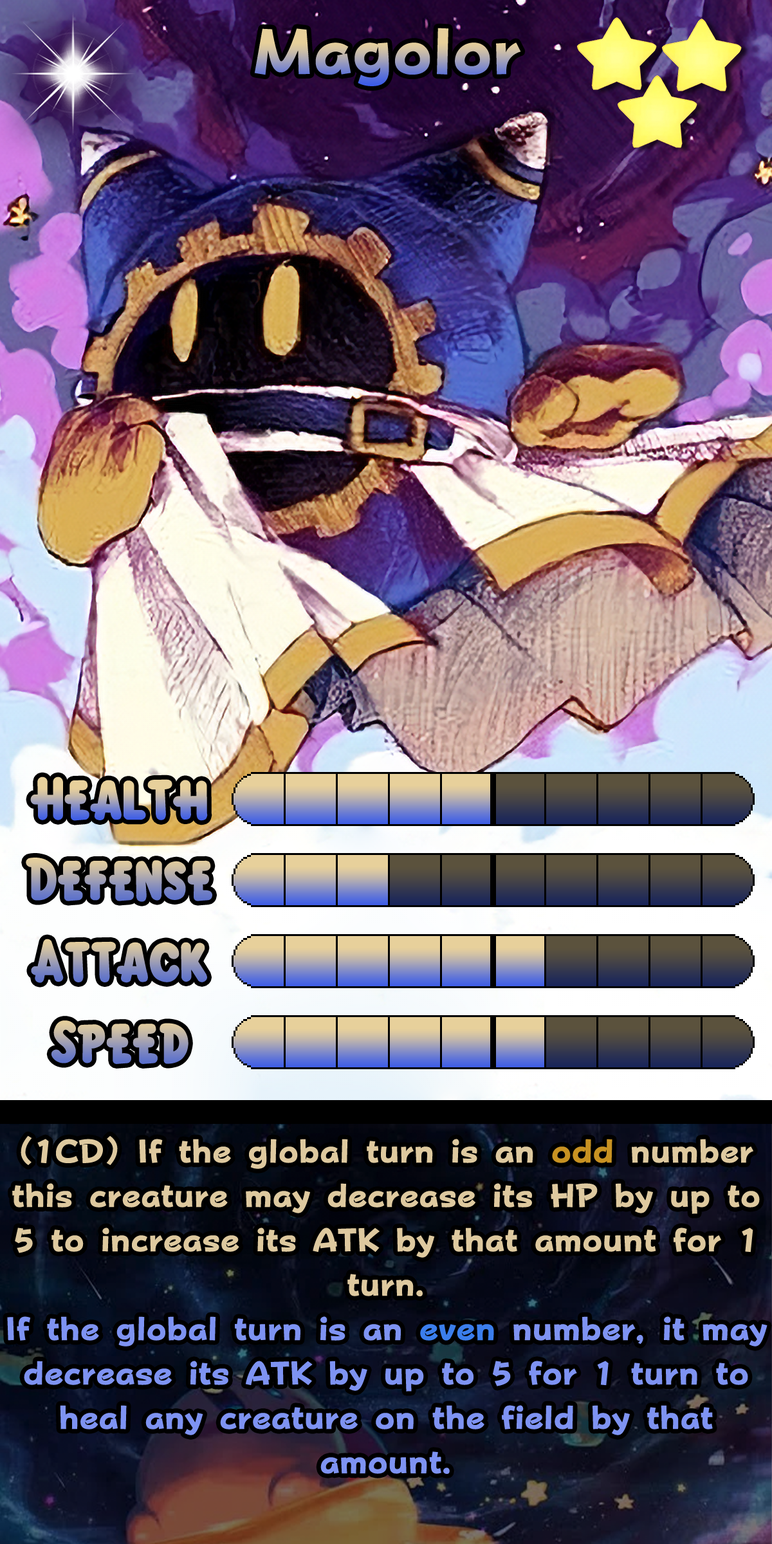
<style>
.page{position:relative;width:772px;height:1544px}
.page>*{position:absolute;margin:0}
.t1{font:110px "FOTPopHappinessStrp-ExtraBold"}
.t2{font:92.7px "KirbyClassic"}
.t3{font:56px/44.4px "FOTPopHappinessStrp-ExtraBold";color:#7e93f2}
.t4{font:56px/44.4px "FOTPopHappinessStrp-ExtraBold";color:#dec99f}
.t5{font:56px/44.4px "FOTPopHappinessStrp-ExtraBold";color:#c89222}
.t6{font:56px/44.4px "FOTPopHappinessStrp-ExtraBold";color:#3b7eec}
</style>
<div class="page">
<p class="t1" style="left:254px;top:28px;width:267px;height:58px">Magolor</p>
<p class="t2" style="left:30px;top:777px;width:178px;height:44px">Health</p>
<p class="t2" style="left:26px;top:858px;width:186px;height:44px">Defense</p>
<p class="t2" style="left:31px;top:939px;width:176px;height:44px">Attack</p>
<p class="t2" style="left:51px;top:1021px;width:138px;height:43px">Speed</p>
<p class="t3" style="left:7px;top:1136px;width:761px;height:338px;text-align:center"><span class="t4">(1CD) If the global turn is an </span><span class="t5">odd</span><span class="t4"> number this creature may decrease its HP by up to 5 to increase its ATK by that amount for 1 turn.<br></span>If the global turn is an <span class="t6">even</span> number, it may decrease its ATK by up to 5 for 1 turn to heal any creature on the field by that amount.</p>
</div>
